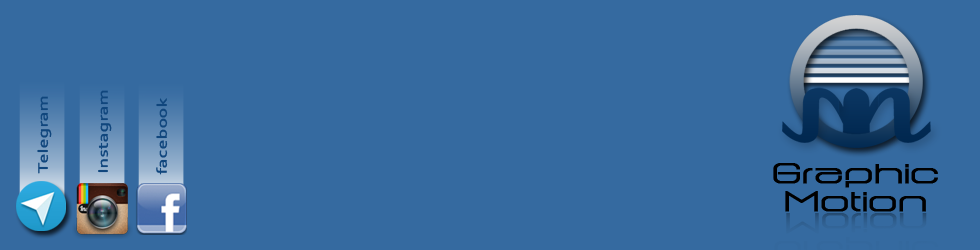
<style>
.page{position:relative;width:980px;height:250px;background:#356aa0}
.page>*{position:absolute;margin:0}
.t1{font:14.3px "Corbel";color:#10467d;font-weight:bold;scale:1.33 1}
.t2{font:31.5px "Dome";color:#000000;font-weight:bold;scale:1.33 1}
</style>
<div class="page">
<p class="t1" style="left:37px;top:96px;width:15px;height:78px;rotate:-90deg">Telegram</p>
<p class="t1" style="left:98px;top:90px;width:14px;height:83px;rotate:-90deg">Instagram</p>
<p class="t1" style="left:156px;top:98px;width:12px;height:77px;rotate:-90deg">facebook</p>
<p class="t2" style="left:773px;top:163px;width:165px;height:25px">Graphic</p>
<p class="t2" style="left:785px;top:191px;width:141px;height:21px">Motion</p>
</div>
